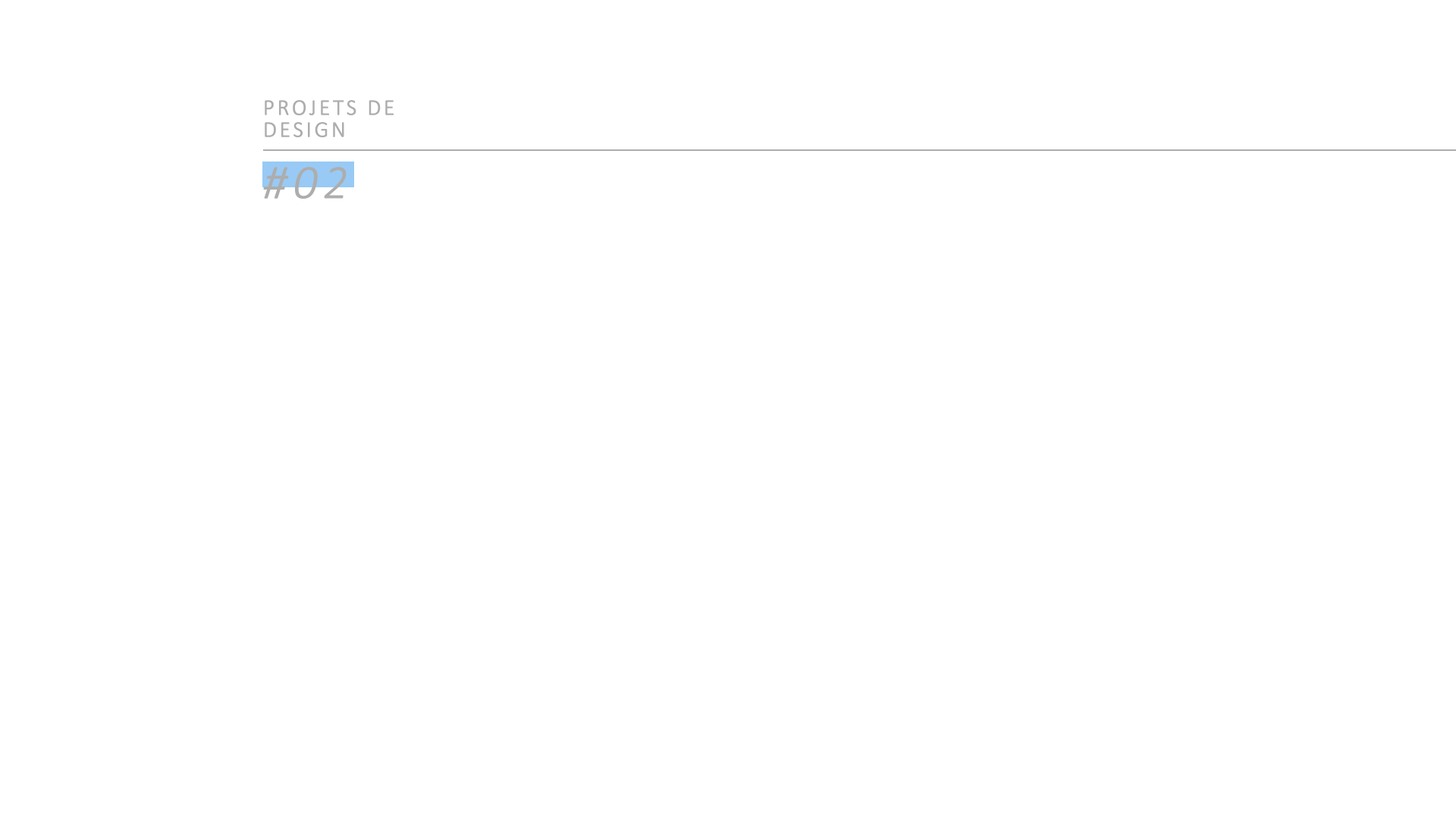
<style>
.page{position:relative;width:1456px;height:819px;background:#ffffff}
.page>*{position:absolute;margin:0}
.t1{font:22.3px/22px "Calibri-Light";letter-spacing:0.1em;color:#adadad;font-weight:bold}
.t2{font:48.1px "Calibri-LightItalic";letter-spacing:0.1em;color:#adadad;font-weight:bold}
</style>
<div class="page">
<p class="t1" style="left:265px;top:100px;width:129px;height:37px">PROJETS DE<br>DESIGN</p>
<p class="t2" style="left:263px;top:167px;width:84px;height:32px">#02</p>
</div>
